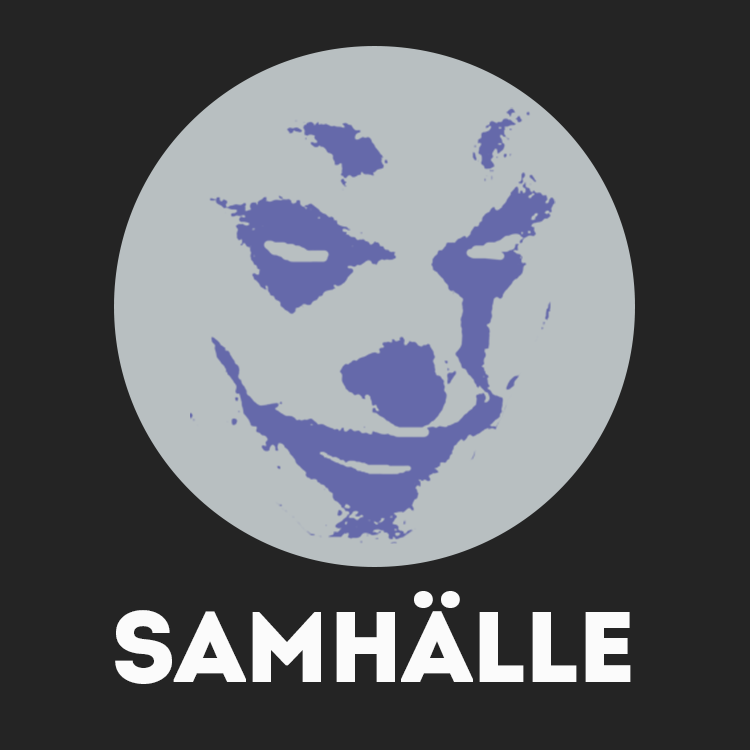
<style>
.page{position:relative;width:750px;height:750px;background:#242424}
.page>*{position:absolute;margin:0}
.t1{font:100px "Intro-Black";color:#fbfbfb}
</style>
<div class="page">
<p class="t1" style="left:115px;top:591px;width:516px;height:93px">SAMHÄLLE</p>
</div>
